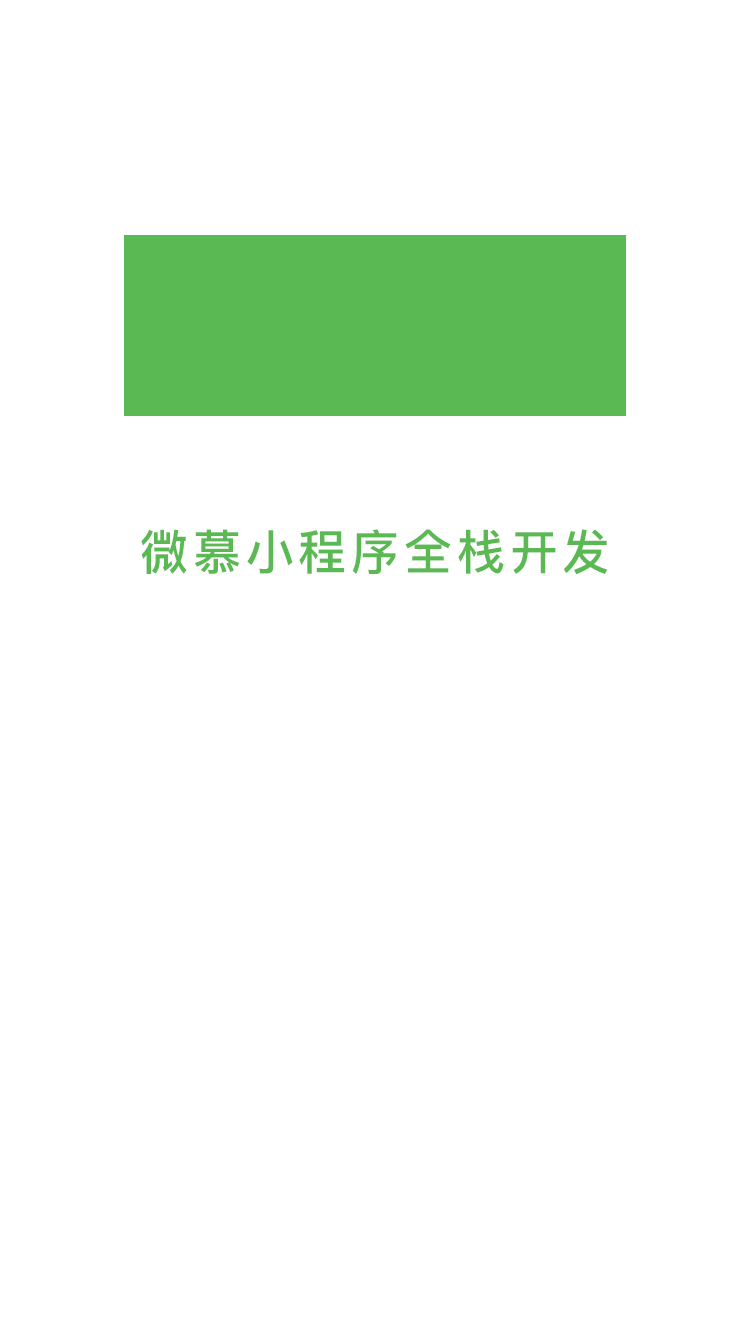
<style>
.page{position:relative;width:750px;height:1334px;background:#ffffff}
.page>*{position:absolute;margin:0}
.t1{font:48px "PingFangSC-Medium";letter-spacing:0.1em;color:#5ab953}
</style>
<div class="page">
<p class="t1" style="left:141px;top:529px;width:467px;height:46px">微慕小程序全栈开发</p>
</div>
